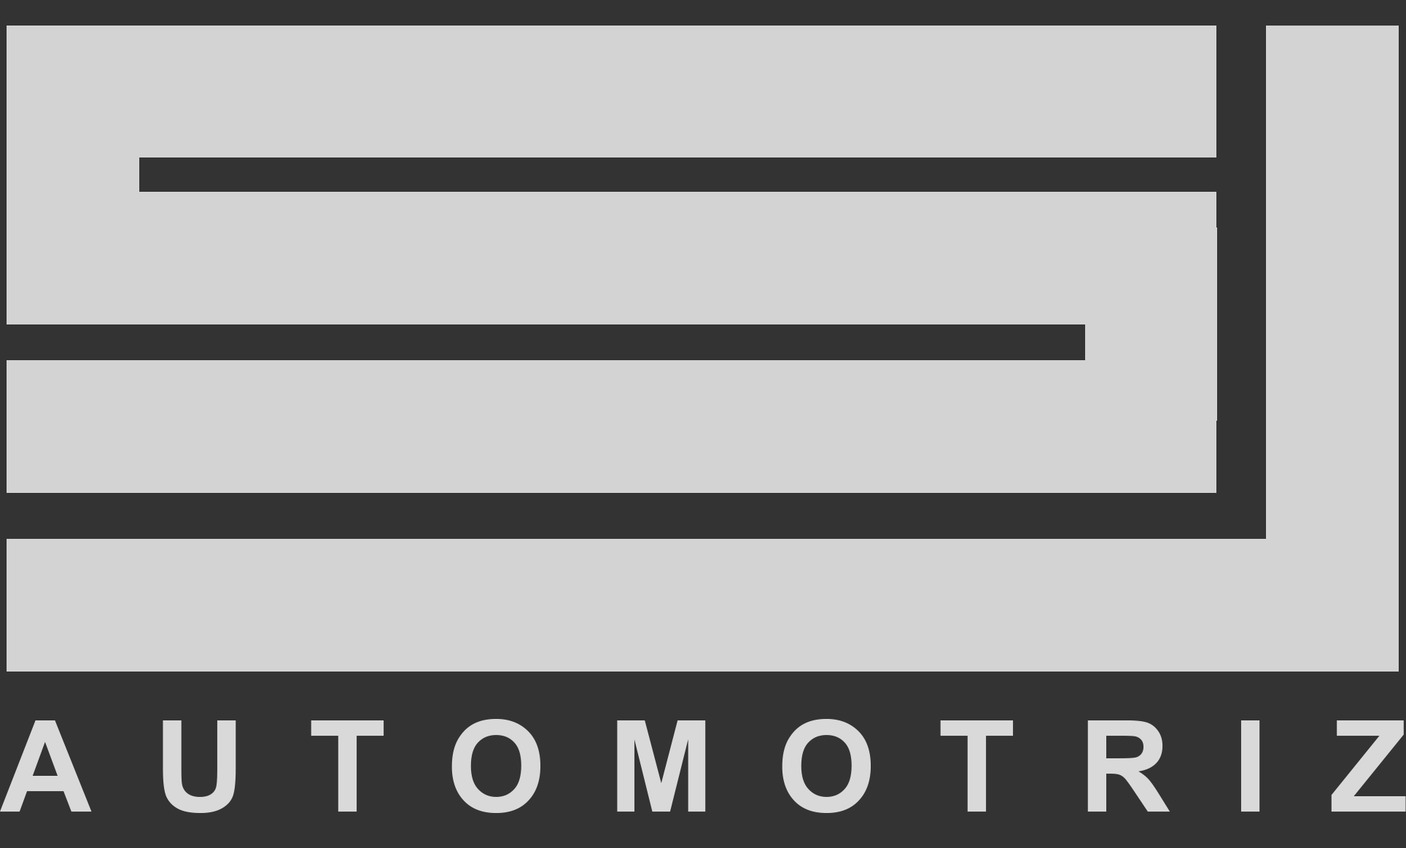
<style>
.page{position:relative;width:1406px;height:848px;background:#d3d3d3}
.page>*{position:absolute;margin:0}
.t1{font:127.9px "ArialNarrow-Bold";letter-spacing:0.4em;color:#d9d9d9;scale:1.22 1}
</style>
<div class="page">
<p class="t1" style="left:0px;top:719px;width:1406px;height:94px">AUTOMOTRIZ</p>
</div>
